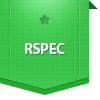
<style>
.page{position:relative;width:100px;height:100px;background:#ffffff}
.page>*{position:absolute;margin:0}
.t1{font:15px "MyriadPro-Bold";letter-spacing:-0.025em;color:#ffffff;text-transform:uppercase}
</style>
<div class="page">
<p class="t1" style="left:25px;top:43px;width:40px;height:11px">RSPEC</p>
</div>
